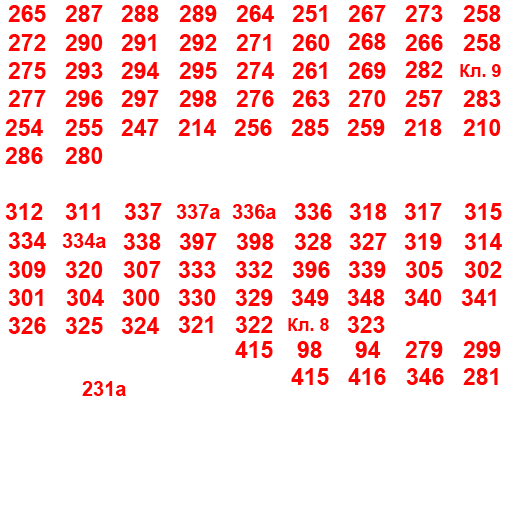
<style>
.page{position:relative;width:512px;height:512px;background:#ffffff}
.page>*{position:absolute;margin:0}
.t1{font:23px "Arial-BoldMT";color:#ff0101}
.t2{font:18px "Arial-BoldMT";color:#ff0101}
.t3{font:20px "Arial-BoldMT";color:#ff0101}
</style>
<div class="page">
<p class="t1" style="left:8px;top:5px;width:38px;height:17px">265</p>
<p class="t1" style="left:65px;top:5px;width:38px;height:17px">287</p>
<p class="t1" style="left:121px;top:5px;width:38px;height:17px">288</p>
<p class="t1" style="left:179px;top:5px;width:38px;height:17px">289</p>
<p class="t1" style="left:236px;top:5px;width:38px;height:17px">264</p>
<p class="t1" style="left:292px;top:5px;width:35px;height:17px">251</p>
<p class="t1" style="left:348px;top:5px;width:38px;height:17px">267</p>
<p class="t1" style="left:405px;top:5px;width:38px;height:17px">273</p>
<p class="t1" style="left:463px;top:5px;width:38px;height:17px">258</p>
<p class="t1" style="left:8px;top:34px;width:38px;height:17px">272</p>
<p class="t1" style="left:65px;top:34px;width:38px;height:17px">290</p>
<p class="t1" style="left:121px;top:34px;width:35px;height:17px">291</p>
<p class="t1" style="left:179px;top:34px;width:38px;height:17px">292</p>
<p class="t1" style="left:236px;top:34px;width:35px;height:17px">271</p>
<p class="t1" style="left:292px;top:34px;width:38px;height:17px">260</p>
<p class="t1" style="left:348px;top:33px;width:38px;height:17px">268</p>
<p class="t1" style="left:405px;top:34px;width:38px;height:17px">266</p>
<p class="t1" style="left:463px;top:34px;width:38px;height:17px">258</p>
<p class="t1" style="left:8px;top:62px;width:38px;height:17px">275</p>
<p class="t1" style="left:65px;top:62px;width:38px;height:17px">293</p>
<p class="t1" style="left:121px;top:62px;width:38px;height:17px">294</p>
<p class="t1" style="left:179px;top:62px;width:38px;height:17px">295</p>
<p class="t1" style="left:236px;top:62px;width:38px;height:17px">274</p>
<p class="t1" style="left:292px;top:62px;width:35px;height:17px">261</p>
<p class="t1" style="left:348px;top:62px;width:38px;height:17px">269</p>
<p class="t1" style="left:405px;top:61px;width:38px;height:17px">282</p>
<p class="t2" style="left:460px;top:64px;width:41px;height:13px">Кл. 9</p>
<p class="t1" style="left:8px;top:90px;width:38px;height:17px">277</p>
<p class="t1" style="left:65px;top:90px;width:38px;height:17px">296</p>
<p class="t1" style="left:121px;top:90px;width:38px;height:17px">297</p>
<p class="t1" style="left:179px;top:90px;width:38px;height:17px">298</p>
<p class="t1" style="left:236px;top:90px;width:38px;height:17px">276</p>
<p class="t1" style="left:292px;top:90px;width:38px;height:17px">263</p>
<p class="t1" style="left:348px;top:90px;width:38px;height:17px">270</p>
<p class="t1" style="left:405px;top:90px;width:38px;height:17px">257</p>
<p class="t1" style="left:463px;top:90px;width:38px;height:17px">283</p>
<p class="t1" style="left:5px;top:119px;width:38px;height:17px">254</p>
<p class="t1" style="left:65px;top:119px;width:38px;height:17px">255</p>
<p class="t1" style="left:121px;top:119px;width:38px;height:17px">247</p>
<p class="t1" style="left:178px;top:119px;width:38px;height:17px">214</p>
<p class="t1" style="left:234px;top:119px;width:38px;height:17px">256</p>
<p class="t1" style="left:291px;top:119px;width:38px;height:17px">285</p>
<p class="t1" style="left:347px;top:119px;width:38px;height:17px">259</p>
<p class="t1" style="left:404px;top:119px;width:38px;height:17px">218</p>
<p class="t1" style="left:463px;top:119px;width:38px;height:17px">210</p>
<p class="t1" style="left:5px;top:147px;width:38px;height:17px">286</p>
<p class="t1" style="left:65px;top:147px;width:38px;height:17px">280</p>
<p class="t1" style="left:5px;top:203px;width:38px;height:17px">312</p>
<p class="t1" style="left:65px;top:203px;width:35px;height:17px">311</p>
<p class="t1" style="left:124px;top:203px;width:38px;height:17px">337</p>
<p class="t3" style="left:176px;top:204px;width:44px;height:15px">337a</p>
<p class="t3" style="left:232px;top:204px;width:44px;height:15px">336a</p>
<p class="t1" style="left:294px;top:203px;width:38px;height:17px">336</p>
<p class="t1" style="left:349px;top:203px;width:38px;height:17px">318</p>
<p class="t1" style="left:404px;top:203px;width:38px;height:17px">317</p>
<p class="t1" style="left:464px;top:203px;width:38px;height:17px">315</p>
<p class="t1" style="left:8px;top:232px;width:38px;height:17px">334</p>
<p class="t3" style="left:62px;top:233px;width:44px;height:15px">334a</p>
<p class="t1" style="left:123px;top:233px;width:38px;height:17px">338</p>
<p class="t1" style="left:179px;top:233px;width:38px;height:17px">397</p>
<p class="t1" style="left:236px;top:233px;width:38px;height:17px">398</p>
<p class="t1" style="left:294px;top:233px;width:38px;height:17px">328</p>
<p class="t1" style="left:349px;top:233px;width:38px;height:17px">327</p>
<p class="t1" style="left:404px;top:233px;width:38px;height:17px">319</p>
<p class="t1" style="left:464px;top:233px;width:38px;height:17px">314</p>
<p class="t1" style="left:8px;top:261px;width:38px;height:17px">309</p>
<p class="t1" style="left:65px;top:261px;width:38px;height:17px">320</p>
<p class="t1" style="left:123px;top:261px;width:38px;height:17px">307</p>
<p class="t1" style="left:178px;top:261px;width:38px;height:17px">333</p>
<p class="t1" style="left:235px;top:261px;width:38px;height:17px">332</p>
<p class="t1" style="left:292px;top:261px;width:38px;height:17px">396</p>
<p class="t1" style="left:348px;top:261px;width:38px;height:17px">339</p>
<p class="t1" style="left:405px;top:261px;width:38px;height:17px">305</p>
<p class="t1" style="left:464px;top:261px;width:38px;height:17px">302</p>
<p class="t1" style="left:8px;top:289px;width:35px;height:17px">301</p>
<p class="t1" style="left:66px;top:289px;width:38px;height:17px">304</p>
<p class="t1" style="left:122px;top:289px;width:38px;height:17px">300</p>
<p class="t1" style="left:178px;top:289px;width:38px;height:17px">330</p>
<p class="t1" style="left:235px;top:289px;width:38px;height:17px">329</p>
<p class="t1" style="left:291px;top:289px;width:38px;height:17px">349</p>
<p class="t1" style="left:347px;top:289px;width:38px;height:17px">348</p>
<p class="t1" style="left:404px;top:289px;width:38px;height:17px">340</p>
<p class="t1" style="left:461px;top:289px;width:35px;height:17px">341</p>
<p class="t1" style="left:8px;top:317px;width:38px;height:17px">326</p>
<p class="t1" style="left:65px;top:317px;width:38px;height:17px">325</p>
<p class="t1" style="left:121px;top:317px;width:38px;height:17px">324</p>
<p class="t1" style="left:178px;top:316px;width:35px;height:17px">321</p>
<p class="t1" style="left:235px;top:316px;width:38px;height:17px">322</p>
<p class="t2" style="left:288px;top:318px;width:41px;height:13px">Кл. 8</p>
<p class="t1" style="left:347px;top:316px;width:38px;height:17px">323</p>
<p class="t1" style="left:235px;top:341px;width:38px;height:17px">415</p>
<p class="t1" style="left:297px;top:341px;width:25px;height:17px">98</p>
<p class="t1" style="left:355px;top:341px;width:26px;height:17px">94</p>
<p class="t1" style="left:405px;top:341px;width:38px;height:17px">279</p>
<p class="t1" style="left:463px;top:341px;width:38px;height:17px">299</p>
<p class="t1" style="left:291px;top:368px;width:38px;height:17px">415</p>
<p class="t1" style="left:348px;top:368px;width:38px;height:17px">416</p>
<p class="t1" style="left:406px;top:368px;width:38px;height:17px">346</p>
<p class="t1" style="left:463px;top:368px;width:35px;height:17px">281</p>
<p class="t3" style="left:82px;top:381px;width:44px;height:15px">231a</p>
</div>
